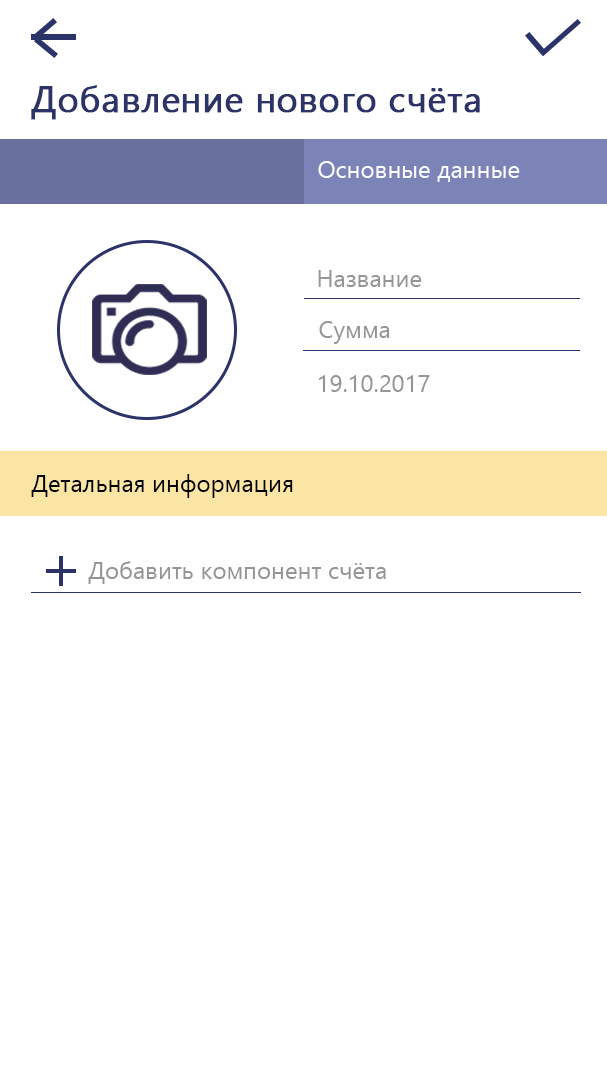
<style>
.page{position:relative;width:607px;height:1080px;background:#ffffff}
.page>*{position:absolute;margin:0}
.t1{font:36px "YuGothicUI-Regular";color:#2b3368;font-weight:bold}
.t2{font:24px "YuGothicUI-Regular";color:#fbfcff}
.t3{font:24px "YuGothicUI-Regular";color:#959598}
.t4{font:24px "YuGothicUI-Regular";color:#000000}
</style>
<div class="page">
<p class="t1" style="left:31px;top:85px;width:449px;height:35px">Добавление нового счёта</p>
<p class="t2" style="left:318px;top:161px;width:202px;height:21px">Основные данные</p>
<p class="t3" style="left:318px;top:270px;width:104px;height:17px">Название</p>
<p class="t3" style="left:319px;top:321px;width:71px;height:23px">Сумма</p>
<p class="t3" style="left:319px;top:375px;width:111px;height:17px">19.10.2017</p>
<p class="t4" style="left:31px;top:474px;width:262px;height:24px">Детальная информация</p>
<p class="t3" style="left:88px;top:561px;width:298px;height:23px">Добавить компонент счёта</p>
</div>
